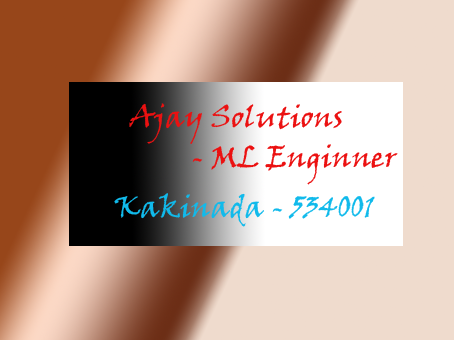
<style>
.page{position:relative;width:454px;height:340px;background:#efdbcd}
.page>*{position:absolute;margin:0}
.t1{font:30px "VinerHandITC";color:#eb1111}
.t2{font:30px "VinerHandITC";color:#11baeb}
</style>
<div class="page">
<p class="t1" style="left:129px;top:103px;width:213px;height:41px">Ajay Solutions</p>
<p class="t1" style="left:192px;top:144px;width:206px;height:41px">- ML Enginner</p>
<p class="t2" style="left:114px;top:193px;width:261px;height:34px">Kakinada - 534001</p>
</div>
